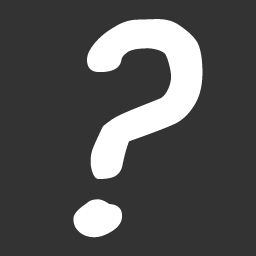
<style>
.page{position:relative;width:256px;height:256px;background:#333333}
.page>*{position:absolute;margin:0}
.t1{font:284.7px "SegoePrint-Bold";color:#ffffff}
</style>
<div class="page">
<p class="t1" style="left:73px;top:19px;width:130px;height:219px">?</p>
</div>
